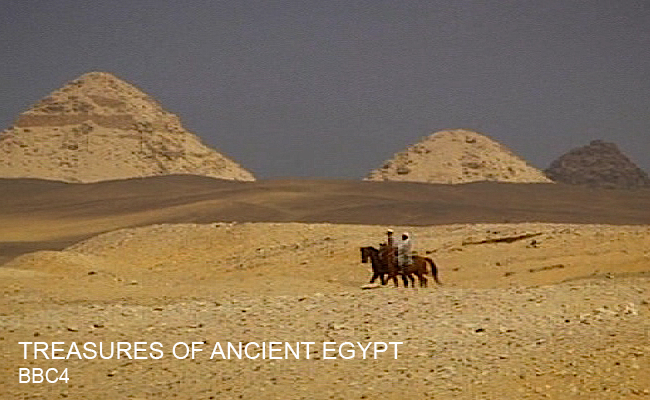
<style>
.page{position:relative;width:650px;height:400px}
.page>*{position:absolute;margin:0}
.t1{font:24px "ArialMT";color:#fefefe}
.t2{font:20px "ArialMT";color:#ffffff}
</style>
<div class="page">
<p class="t1" style="left:18px;top:342px;width:385px;height:17px">TREASURES OF ANCIENT EGYPT</p>
<p class="t2" style="left:19px;top:368px;width:51px;height:15px">BBC4</p>
</div>
